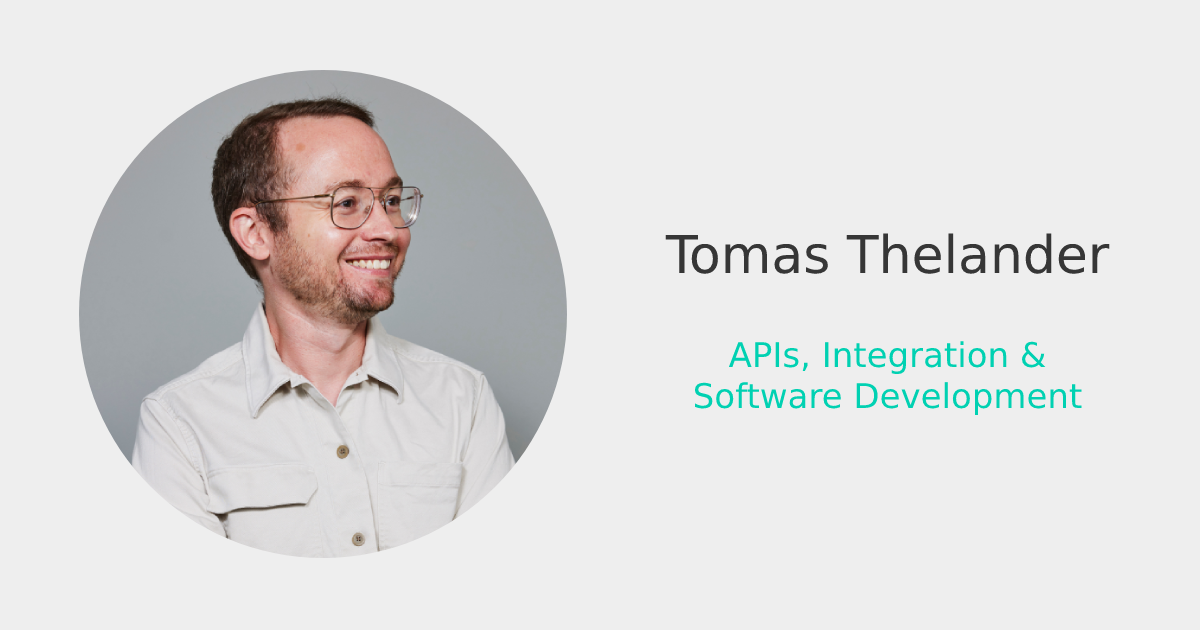
<style>
.page{position:relative;width:1200px;height:630px;background:#eeeeee}
.page>*{position:absolute;margin:0}
.t1{font:52px "DejaVuSans";color:#363636}
.t2{font:34px "DejaVuSans";color:#00d1b2}
</style>
<div class="page">
<p class="t1" style="left:665px;top:233px;width:445px;height:41px">Tomas Thelander</p>
<p class="t2" style="left:694px;top:341px;width:388px;height:75px;text-align:center">APIs, Integration &amp; Software Development</p>
</div>
